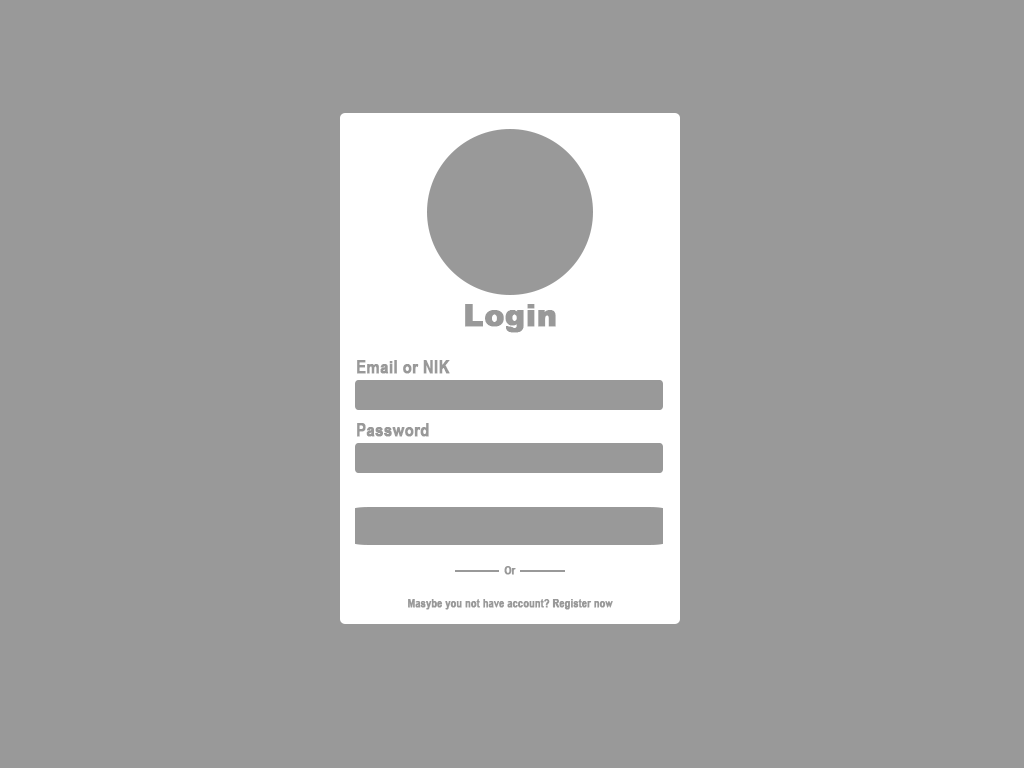
<style>
.page{position:relative;width:1024px;height:768px;background:#999999}
.page>*{position:absolute;margin:0}
.t1{font:30px "Arial-Black";color:#999999;font-weight:bold}
.t2{font:18px "ArialNarrow-Bold";color:#999999;font-weight:bold}
.t3{font:11px "ArialNarrow-Bold";color:#999999;font-weight:bold}
</style>
<div class="page">
<p class="t1" style="left:465px;top:304px;width:91px;height:29px">Login</p>
<p class="t2" style="left:357px;top:423px;width:72px;height:14px">Password</p>
<p class="t3" style="left:504px;top:566px;width:12px;height:9px">Or</p>
<p class="t3" style="left:408px;top:599px;width:205px;height:11px">Masybe you not have account? Register now</p>
</div>
